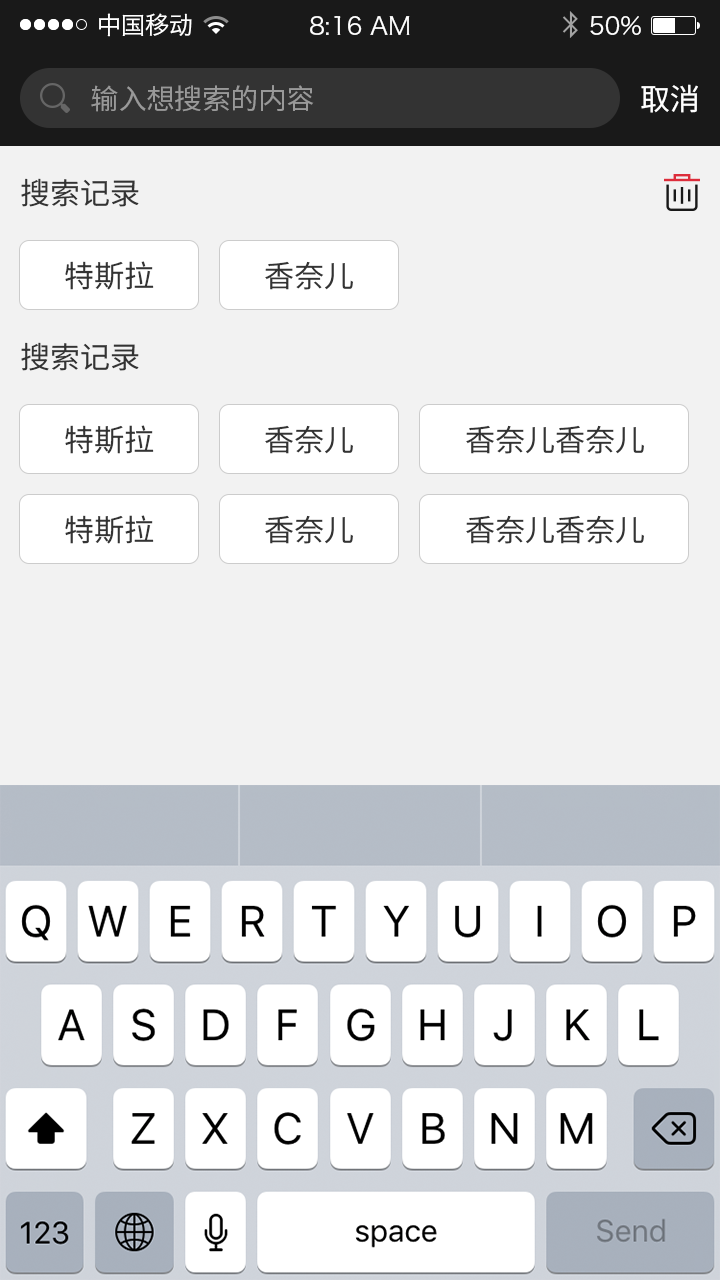
<style>
.page{position:relative;width:720px;height:1280px;background:#f2f2f2}
.page>*{position:absolute;margin:0}
.t1{font:24px "HiraginoSansGB-W3";color:#ffffff}
.t2{font:28px "NotoSansHans-Regular";color:#999999}
.t3{font:30px "NotoSansHans-Regular";color:#ffffff}
.t4{font:30px "NotoSansHans-Regular";color:#333333}
</style>
<div class="page">
<p class="t1" style="left:99px;top:13px;width:93px;height:24px">中国移动</p>
<p class="t1" style="left:310px;top:16px;width:100px;height:19px">8:16 AM</p>
<p class="t1" style="left:590px;top:16px;width:51px;height:19px">50%</p>
<p class="t2" style="left:91px;top:85px;width:223px;height:27px">输入想搜索的内容</p>
<p class="t3" style="left:641px;top:84px;width:57px;height:29px">取消</p>
<p class="t4" style="left:21px;top:178px;width:118px;height:29px">搜索记录</p>
<p class="t4" style="left:65px;top:261px;width:89px;height:29px">特斯拉</p>
<p class="t4" style="left:265px;top:261px;width:88px;height:29px">香奈儿</p>
<p class="t4" style="left:21px;top:342px;width:118px;height:29px">搜索记录</p>
<p class="t4" style="left:65px;top:425px;width:89px;height:29px">特斯拉</p>
<p class="t4" style="left:265px;top:425px;width:88px;height:29px">香奈儿</p>
<p class="t4" style="left:466px;top:425px;width:178px;height:29px">香奈儿香奈儿</p>
<p class="t4" style="left:65px;top:515px;width:89px;height:29px">特斯拉</p>
<p class="t4" style="left:265px;top:515px;width:88px;height:29px">香奈儿</p>
<p class="t4" style="left:466px;top:515px;width:178px;height:29px">香奈儿香奈儿</p>
</div>
